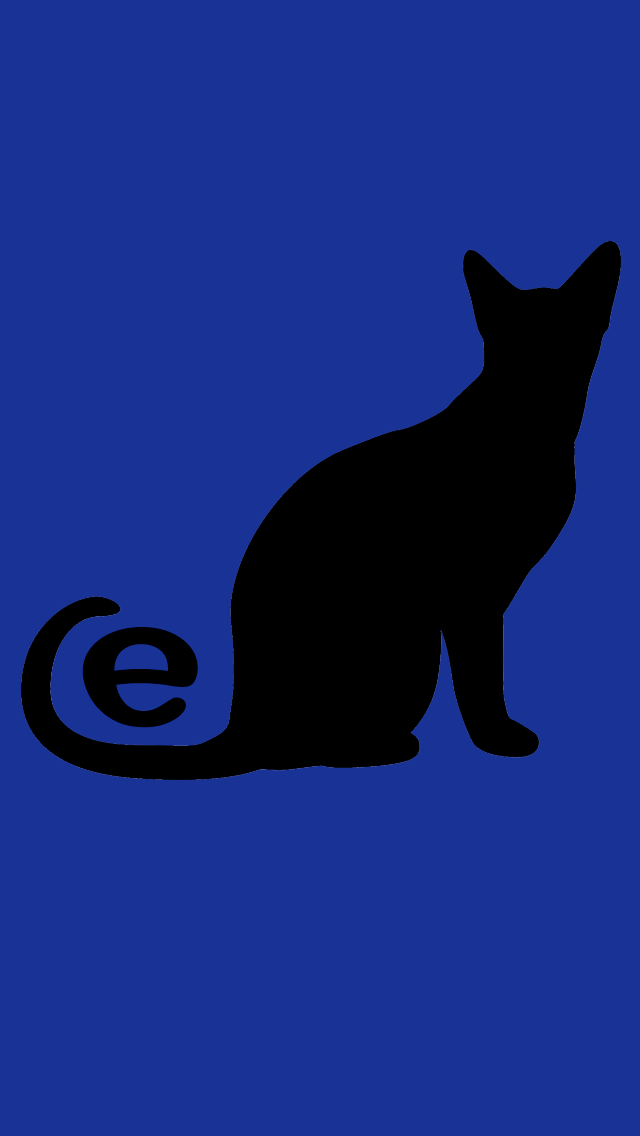
<style>
.page{position:relative;width:640px;height:1136px;background:#193296}
.page>*{position:absolute;margin:0}
.t1{font:185px "ArialRoundedMTBold";color:#000000;scale:0.6 1}
</style>
<div class="page">
<p class="t1" style="left:82px;top:627px;width:116px;height:101px">e</p>
</div>
